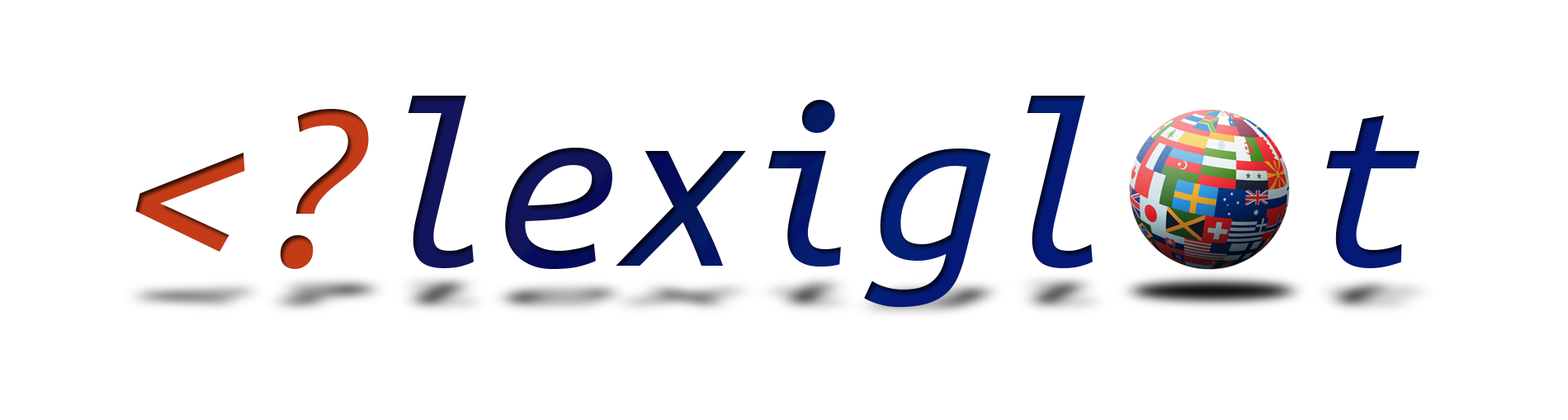
<style>
.page{position:relative;width:1568px;height:420px;background:#ffffff}
.page>*{position:absolute;margin:0}
.t1{font:247.6px "UbuntuMono-Italic"}
</style>
<div class="page">
<p class="t1" style="left:135px;top:95px;width:1284px;height:212px">&lt;?lexigl  t</p>
</div>
